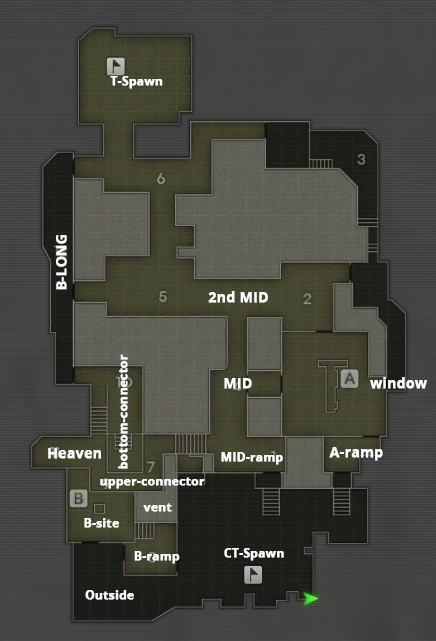
<style>
.page{position:relative;width:436px;height:641px}
.page>*{position:absolute;margin:0}
.t1{font:12px "OpenSans-Bold";color:#ffffff;font-weight:bold}
.t2{font:14px "OpenSans-Bold";color:#ffffff;font-weight:bold}
</style>
<div class="page">
<p class="t1" style="left:110px;top:76px;width:53px;height:13px">T-Spawn</p>
<p class="t2" style="left:56px;top:235px;width:11px;height:55px;rotate:-90deg">B-LONG</p>
<p class="t2" style="left:208px;top:291px;width:60px;height:12px">2nd MID</p>
<p class="t1" style="left:118px;top:354px;width:10px;height:115px;rotate:-90deg">bottom-connector</p>
<p class="t2" style="left:370px;top:377px;width:57px;height:12px">window</p>
<p class="t2" style="left:224px;top:378px;width:28px;height:11px">MID</p>
<p class="t2" style="left:48px;top:448px;width:53px;height:11px">Heaven</p>
<p class="t2" style="left:329px;top:447px;width:54px;height:14px">A-ramp</p>
<p class="t1" style="left:221px;top:452px;width:62px;height:13px">MID-ramp</p>
<p class="t1" style="left:100px;top:477px;width:105px;height:12px">upper-connector</p>
<p class="t1" style="left:143px;top:503px;width:29px;height:9px">vent</p>
<p class="t1" style="left:84px;top:518px;width:35px;height:10px">B-site</p>
<p class="t1" style="left:134px;top:551px;width:46px;height:13px">B-ramp</p>
<p class="t1" style="left:224px;top:548px;width:60px;height:13px">CT-Spawn</p>
<p class="t1" style="left:85px;top:590px;width:49px;height:10px">Outside</p>
</div>
